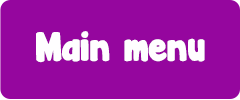
<style>
.page{position:relative;width:240px;height:100px;background:#95069e}
.page>*{position:absolute;margin:0}
.t1{font:36px "JandaManateeSolid";color:#fffeff}
</style>
<div class="page">
<p class="t1" style="left:36px;top:31px;width:169px;height:32px">Main menu</p>
</div>
